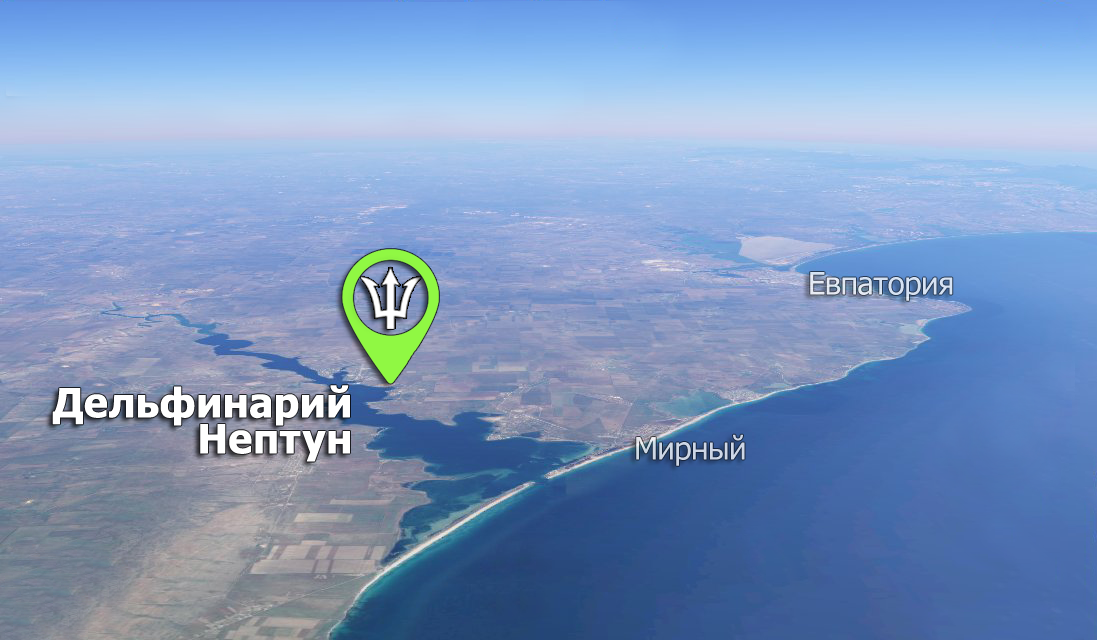
<style>
.page{position:relative;width:1097px;height:640px}
.page>*{position:absolute;margin:0}
.t1{font:31px "Tahoma";color:#d7e3f3}
.t2{font:40px/36px "Tahoma-Bold";color:#ffffff;font-weight:bold}
.t3{font:31px "Tahoma";color:#cdd6e6}
</style>
<div class="page">
<p class="t1" style="left:810px;top:272px;width:143px;height:29px">Евпатория</p>
<p class="t2" style="left:52px;top:385px;width:298px;height:77px;text-align:right">Дельфинарий <br>Нептун</p>
<p class="t3" style="left:636px;top:434px;width:109px;height:32px">Мирный</p>
</div>
